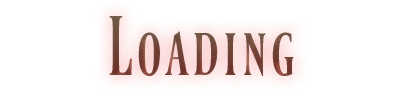
<style>
.page{position:relative;width:400px;height:100px;background:#ffffff}
.page>*{position:absolute;margin:0}
.t1{font:72px "Ferrum";color:#72463a}
</style>
<div class="page">
<p class="t1" style="left:109px;top:16px;width:185px;height:60px">Loading</p>
</div>
